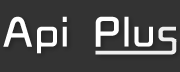
<style>
.page{position:relative;width:180px;height:72px;background:#333333}
.page>*{position:absolute;margin:0}
.t1{font:40px "TRENDS";letter-spacing:0.08em;color:#ffffff}
</style>
<div class="page">
<p class="t1" style="left:3px;top:16px;width:150px;height:38px">Api Plu</p>
</div>
